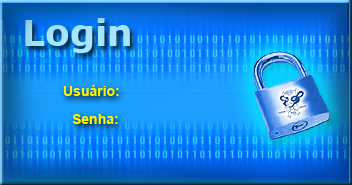
<style>
.page{position:relative;width:352px;height:185px}
.page>*{position:absolute;margin:0}
.t1{font:36px "Verdana-Bold";color:#a6e7ff}
.t2{font:14px "Arial-BoldMT";color:#fff600}
</style>
<div class="page">
<p class="t1" style="left:25px;top:18px;width:105px;height:35px">Login</p>
<p class="t2" style="left:63px;top:85px;width:56px;height:11px">Usuário:</p>
<p class="t2" style="left:72px;top:114px;width:46px;height:10px">Senha:</p>
</div>
